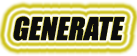
<style>
.page{position:relative;width:137px;height:56px;background:#0d0d0d}
.page>*{position:absolute;margin:0}
.t1{font:29px "Impact";color:#000000;font-style:italic}
</style>
<div class="page">
<p class="t1" style="left:13px;top:16px;width:112px;height:25px;opacity:0.95">GENERATE</p>
</div>
